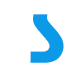
<style>
.page{position:relative;width:71px;height:71px;background:#ffffff}
.page>*{position:absolute;margin:0}
.t1{font:72.9px "Stop";color:#0c99e7}
</style>
<div class="page">
<p class="t1" style="left:30px;top:14px;width:34px;height:49px">S</p>
</div>
